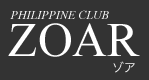
<style>
.page{position:relative;width:149px;height:80px;background:#333333}
.page>*{position:absolute;margin:0}
.t1{font:12px "TimesNewRomanPS-ItalicMT";color:#ffffff}
.t2{font:48px "TimesNewRomanPSMT";color:#ffffff}
.t3{font:12px "HiraKakuProN-W3"}
</style>
<div class="page">
<p class="t1" style="left:10px;top:10px;width:99px;height:9px">PHILIPPINE CLUB</p>
<p class="t2" style="left:8px;top:23px;width:132px;height:34px">ZOAR</p>
<p class="t3" style="left:113px;top:61px;width:22px;height:12px">ゾア</p>
</div>
